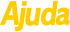
<style>
.page{position:relative;width:70px;height:32px;background:#ffffff}
.page>*{position:absolute;margin:0}
.t1{font:30.7px "RodinPro-EB";letter-spacing:-0.067em;color:#fecd00;font-style:italic;scale:0.83 1}
</style>
<div class="page">
<p class="t1" style="left:0px;top:0px;width:71px;height:32px">Ajuda</p>
</div>
